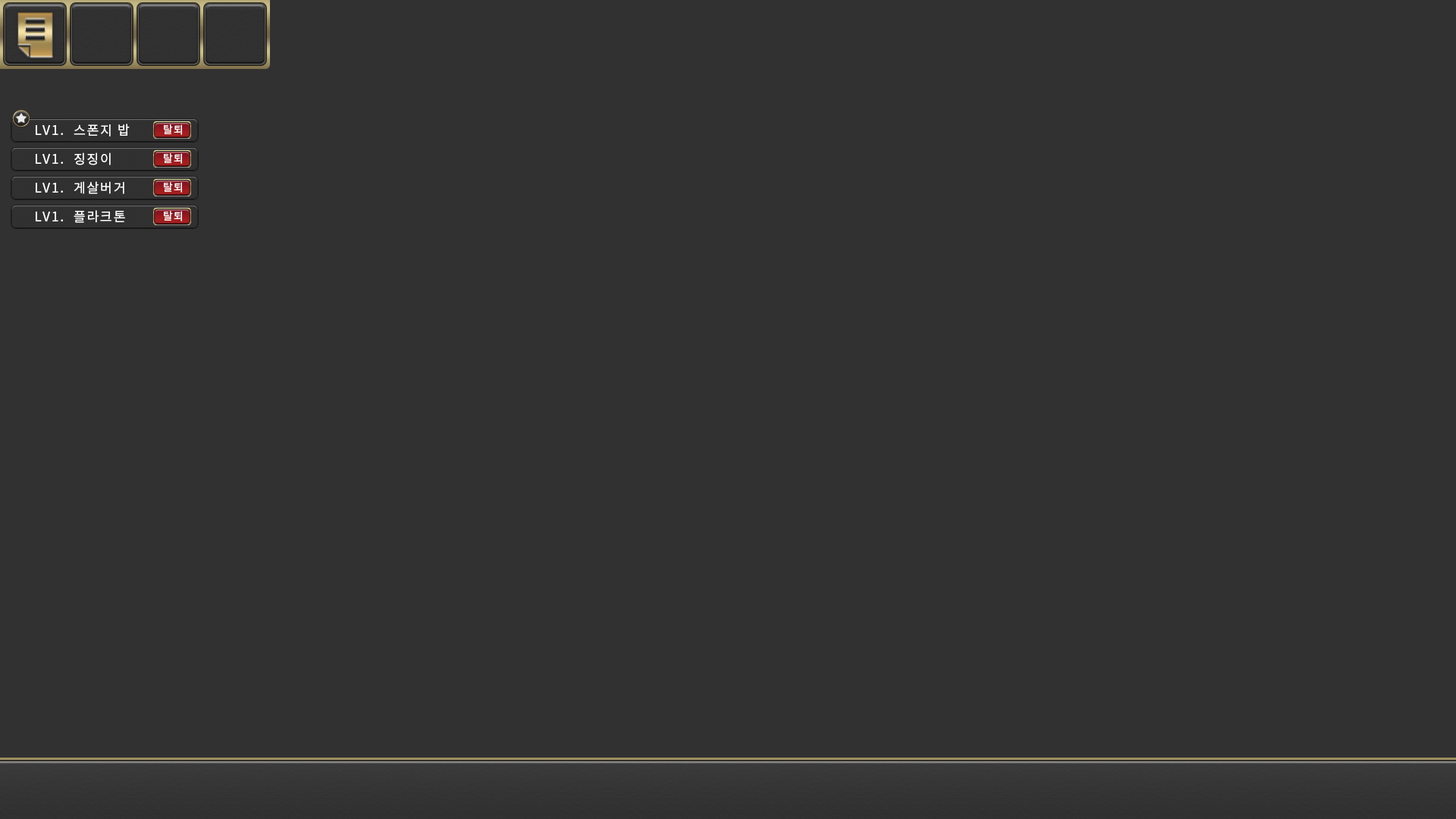
<style>
.page{position:relative;width:1456px;height:819px;background:#313131}
.page>*{position:absolute;margin:0}
.t1{font:13.1px "SourceHanSansKR-Regular";letter-spacing:0.1em;color:#ffffff}
.t2{font:10.6px "SourceHanSansKR-Regular";letter-spacing:0.1em;color:#ffffff}
</style>
<div class="page">
<p class="t1" style="left:36px;top:124px;width:94px;height:12px">LV1.  스폰지 밥</p>
<p class="t2" style="left:164px;top:124px;width:18px;height:11px">탈퇴</p>
<p class="t1" style="left:36px;top:152px;width:75px;height:13px">LV1.  징징이</p>
<p class="t2" style="left:164px;top:153px;width:18px;height:11px">탈퇴</p>
<p class="t1" style="left:36px;top:181px;width:88px;height:13px">LV1.  게살버거</p>
<p class="t2" style="left:164px;top:182px;width:18px;height:11px">탈퇴</p>
<p class="t1" style="left:36px;top:210px;width:89px;height:13px">LV1.  플라크톤</p>
<p class="t2" style="left:164px;top:211px;width:18px;height:10px">탈퇴</p>
</div>
